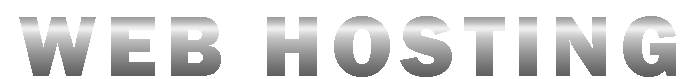
<style>
.page{position:relative;width:680px;height:79px;background:#ffffff}
.page>*{position:absolute;margin:0}
.t1{font:88px "FranklinGothic-Heavy";letter-spacing:0.1em}
</style>
<div class="page">
<p class="t1" style="left:19px;top:16px;width:657px;height:61px">WEB HOSTING</p>
</div>
